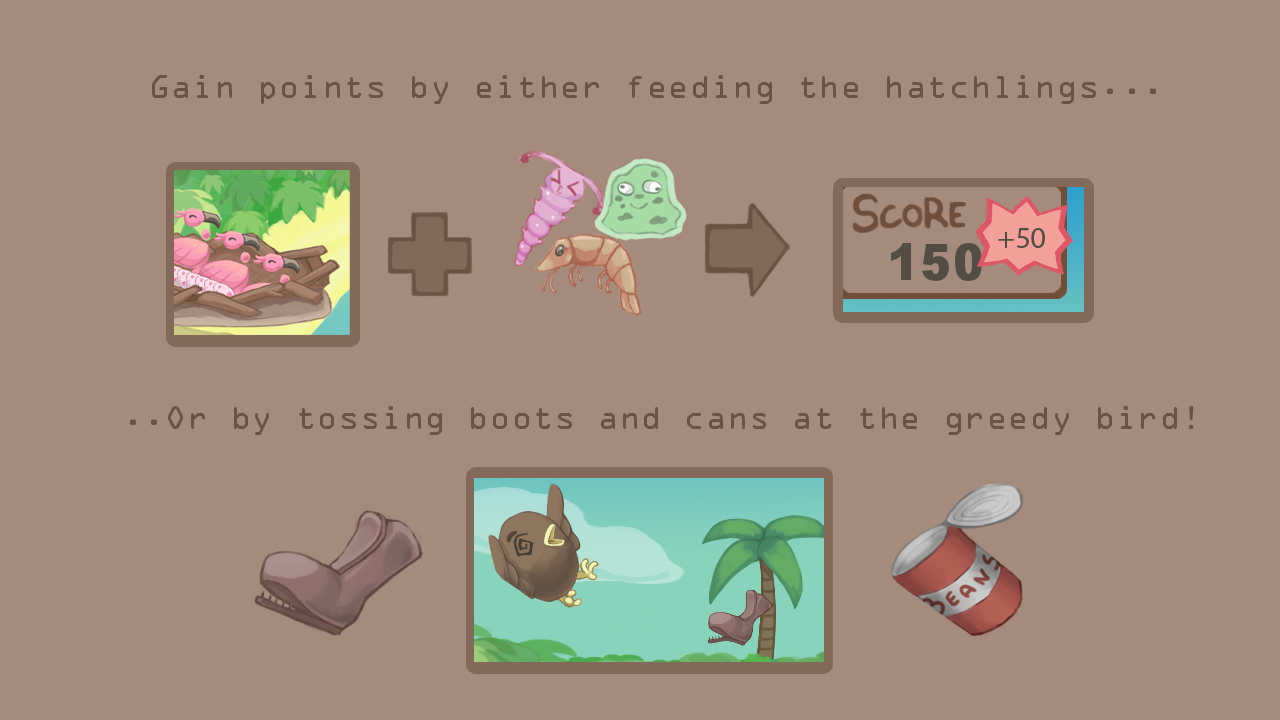
<style>
.page{position:relative;width:1280px;height:720px;background:#a48b7c}
.page>*{position:absolute;margin:0}
.t1{font:30px "OCRAStd";color:#6c5341}
</style>
<div class="page">
<p class="t1" style="left:152px;top:75px;width:1004px;height:29px">Gain points by either feeding the hatchlings...</p>
<p class="t1" style="left:130px;top:406px;width:1064px;height:29px">..Or by tossing boots and cans at the greedy bird!</p>
</div>
